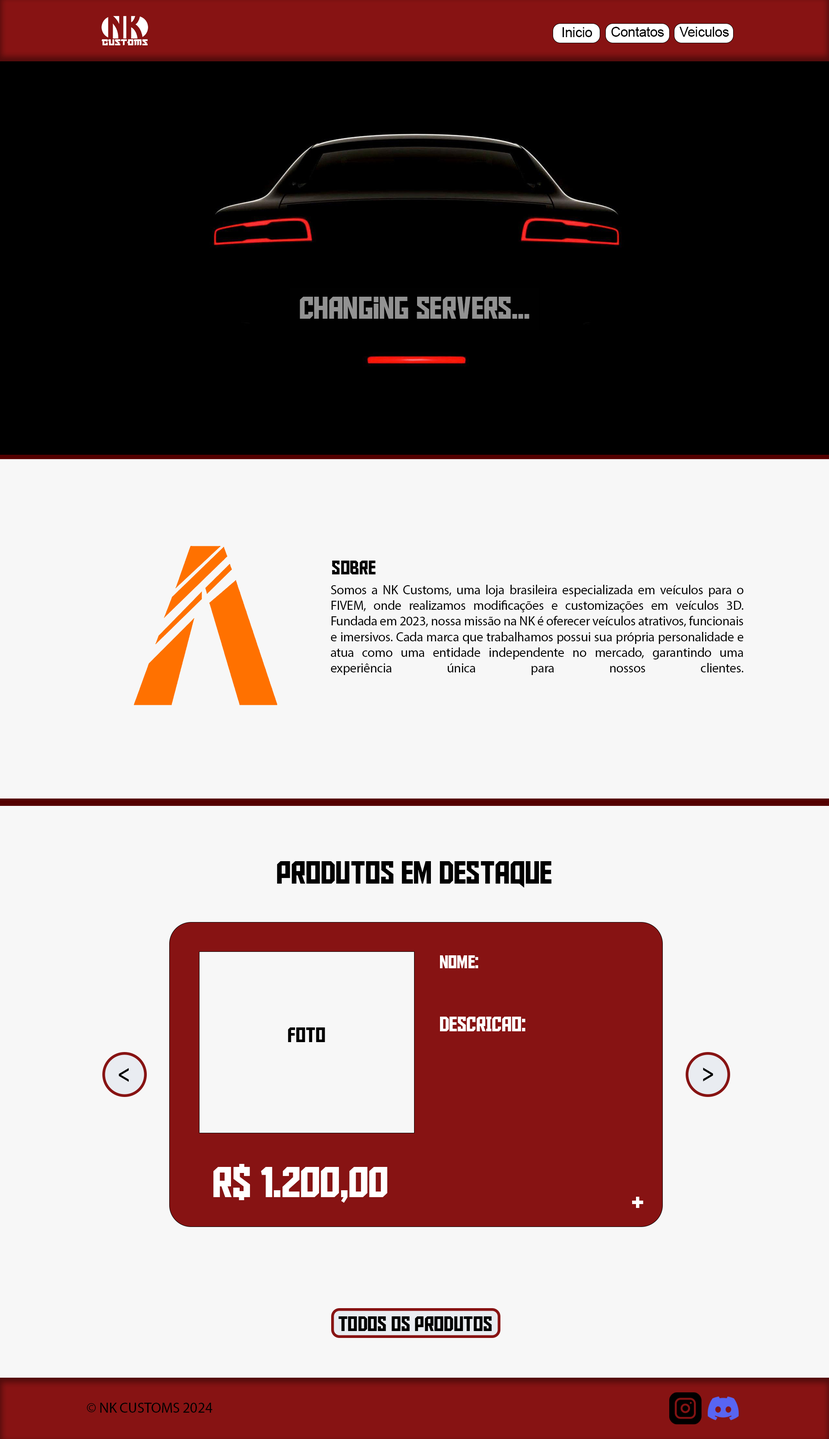
<style>
.page{position:relative;width:829px;height:1439px;background:#f7f7f7}
.page>*{position:absolute;margin:0}
.t1{font:13.6px "ArialMT";letter-spacing:-0.01em;color:#000000}
.t2{font:31.1px "AldotheApache";letter-spacing:-0.01em;color:#929292}
.t3{font:19.6px "AldotheApache";letter-spacing:-0.01em;color:#000000}
.t4{font:13px "MyriadPro-Regular";letter-spacing:-0.01em;color:#000000}
.t5{font:31.4px "AldotheApache";letter-spacing:-0.01em;color:#000000}
.t6{font:18.1px "AldotheApache";letter-spacing:-0.01em;color:#ffffff}
.t7{font:20.7px "AldotheApache";letter-spacing:-0.01em;color:#ffffff}
.t8{font:20.7px "AldotheApache";letter-spacing:-0.01em;color:#000000}
.t9{font:42.8px "AldotheApache";letter-spacing:-0.01em;color:#ffffff}
.t10{font:14.7px "MyriadPro-Regular";letter-spacing:-0.01em;color:#000000}
</style>
<div class="page">
<p class="t1" style="left:563px;top:27px;width:29px;height:10px">Inicio</p>
<p class="t1" style="left:611px;top:27px;width:53px;height:10px">Contatos</p>
<p class="t1" style="left:679px;top:27px;width:50px;height:10px">Veiculos</p>
<p class="t2" style="left:300px;top:297px;width:229px;height:22px">Changing servers...</p>
<p class="t3" style="left:332px;top:560px;width:44px;height:14px">SOBRE</p>
<p class="t4" style="left:331px;top:585px;width:412px;height:90px;text-align:justify">Somos a NK Customs, uma loja brasileira especializada em veículos para o FIVEM, onde realizamos modificações e customizações em veículos 3D.  Fundada em 2023, nossa missão na NK é oferecer veículos atrativos, funcionais e imersivos. Cada marca que trabalhamos possui sua própria personalidade e atua como uma entidade independente no mercado, garantindo uma experiência única para nossos clientes.</p>
<p class="t5" style="left:277px;top:861px;width:275px;height:26px">PRODUTOS EM DESTAQUE</p>
<p class="t6" style="left:440px;top:955px;width:38px;height:13px">NOME:</p>
<p class="t7" style="left:440px;top:1016px;width:85px;height:15px">DESCRICAO:</p>
<p class="t8" style="left:288px;top:1027px;width:37px;height:15px">FOTO</p>
<p class="t8" style="left:119px;top:1068px;width:10px;height:13px">&lt;</p>
<p class="t8" style="left:703px;top:1067px;width:10px;height:14px;rotate:180deg">&lt;</p>
<p class="t9" style="left:213px;top:1164px;width:174px;height:38px">R$ 1.200,00</p>
<p class="t7" style="left:632px;top:1196px;width:11px;height:12px">+</p>
<p class="t8" style="left:338px;top:1316px;width:154px;height:15px">TODOS OS PRODUTOS</p>
<p class="t10" style="left:87px;top:1402px;width:125px;height:10px">© NK CUSTOMS 2024</p>
</div>
